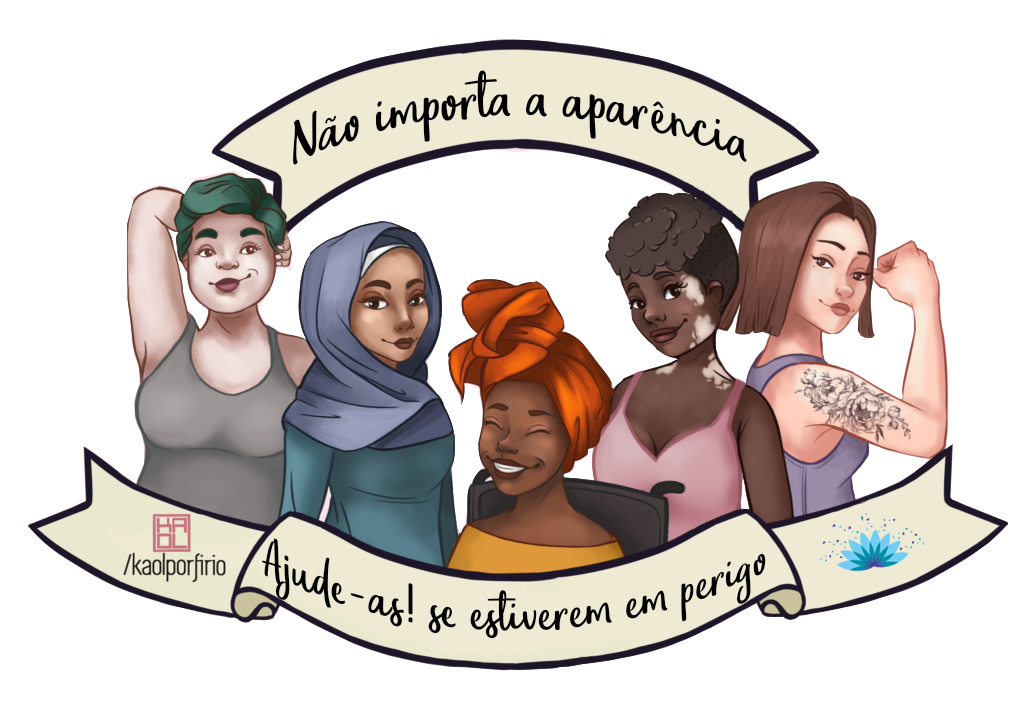
<style>
.page{position:relative;width:1024px;height:710px;background:#ffffff}
.page>*{position:absolute;margin:0}
.t1{font:69.4px "EufoniemOne";color:#000000}
.t2{font:59px "EufoniemOne";color:#000000}
</style>
<div class="page">
<p class="t1" style="left:293px;top:70px;width:454px;height:95px">Não importa a aparência</p>
<p class="t2" style="left:262px;top:538px;width:504px;height:101px;text-align:center">Ajude-as! se estiverem em perigo</p>
</div>
